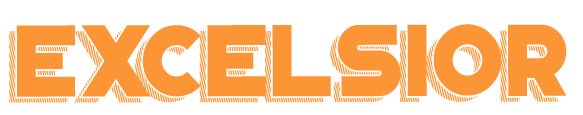
<style>
.page{position:relative;width:583px;height:115px;background:#ffffff}
.page>*{position:absolute;margin:0}
.t1{font:101.6px "Portico-Vintage";letter-spacing:-0.063em;color:#fc9536;scale:0.95 1}
</style>
<div class="page">
<p class="t1" style="left:9px;top:24px;width:558px;height:79px">EXCELSIOR</p>
</div>
